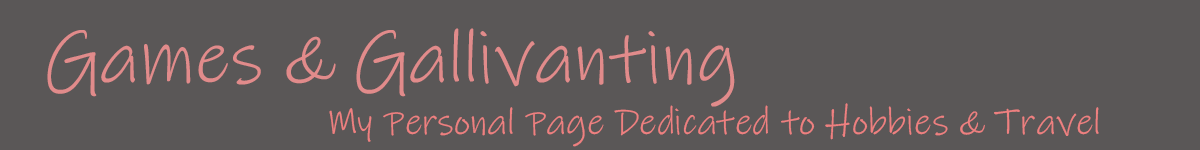
<style>
.page{position:relative;width:1200px;height:150px;background:#5a5757}
.page>*{position:absolute;margin:0}
.t1{font:75px "InkFree";color:#e18b8b}
.t2{font:100px "BDRmono2006-Light";color:#282828}
.t3{font:37.5px "InkFree";color:#ee8080}
.t4{font:37.5px "BDRmono2006-Light";color:#282828}
</style>
<div class="page">
<p class="t1" style="left:47px;top:28px;width:688px;height:79px"><span class="t2">                       </span>Games &amp; Gallivanting</p>
<p class="t3" style="left:329px;top:103px;width:770px;height:44px"><span class="t4">                               </span>My Personal Page Dedicated to Hobbies &amp; Travel</p>
</div>
